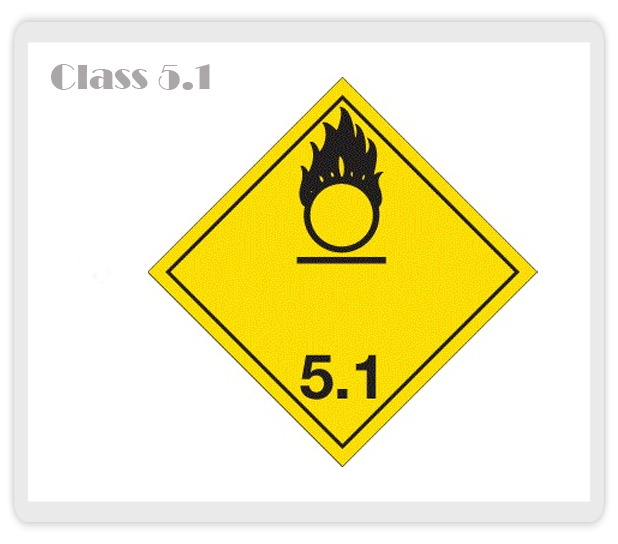
<style>
.page{position:relative;width:618px;height:544px;background:#ffffff}
.page>*{position:absolute;margin:0}
.t1{font:36px "Broadway";color:#aca7a7}
</style>
<div class="page">
<p class="t1" style="left:51px;top:64px;width:159px;height:26px">Class 5.1</p>
</div>
